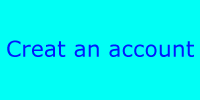
<style>
.page{position:relative;width:200px;height:100px;background:#00fff6}
.page>*{position:absolute;margin:0}
.t1{font:22px "MSReferenceSansSerif";color:#0018ff}
</style>
<div class="page">
<p class="t1" style="left:7px;top:40px;width:187px;height:17px">Creat an account</p>
</div>
